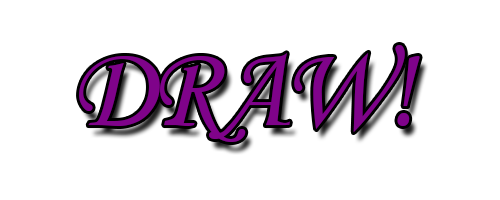
<style>
.page{position:relative;width:500px;height:200px;background:#ffffff}
.page>*{position:absolute;margin:0}
.t1{font:117.1px "MonotypeCorsiva";letter-spacing:-0.04em;color:#7f038a}
</style>
<div class="page">
<p class="t1" style="left:79px;top:45px;width:341px;height:97px">DRAW!</p>
</div>
